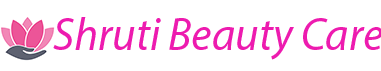
<style>
.page{position:relative;width:381px;height:71px;background:#ffffff}
.page>*{position:absolute;margin:0}
.t1{font:46px "MyriadPro-It";color:#ed1baf}
</style>
<div class="page">
<p class="t1" style="left:53px;top:17px;width:330px;height:43px">Shruti Beauty Care</p>
</div>
